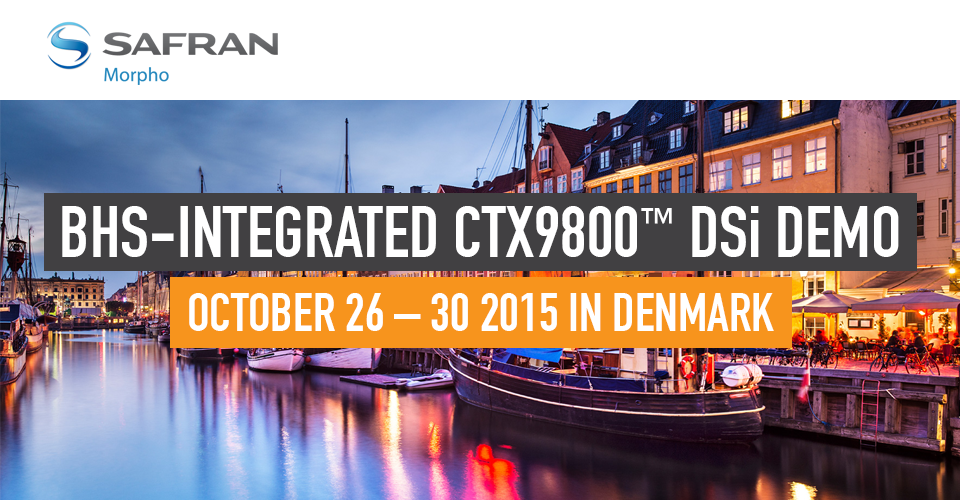
<style>
.page{position:relative;width:960px;height:500px;background:#ffffff}
.page>*{position:absolute;margin:0}
.t1{font:72px "DINEngschrift";color:#ffffff;text-transform:uppercase}
.t2{font:62.4px "DINEngschrift";color:#ffffff;text-transform:uppercase}
.t3{font:72px "DINEngschrift";color:#ffffff}
.t4{font:53.5px "DINEngschrift";color:#ffffff;text-transform:uppercase}
</style>
<div class="page">
<p class="t1" style="left:62px;top:206px;width:837px;height:51px">BHS-integrated CTX9800<span class="t2">™</span> DS<span class="t3">i</span> demo</p>
<p class="t4" style="left:189px;top:293px;width:585px;height:38px">October 26 – 30 2015 in Denmark</p>
</div>
